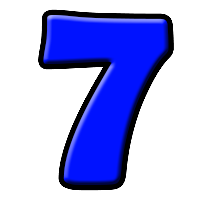
<style>
.page{position:relative;width:200px;height:200px;background:#ffffff}
.page>*{position:absolute;margin:0}
.t1{font:273px "BerlinSansFBDemi-Bold";color:#0012ff}
</style>
<div class="page">
<p class="t1" style="left:43px;top:15px;width:126px;height:170px">7</p>
</div>
